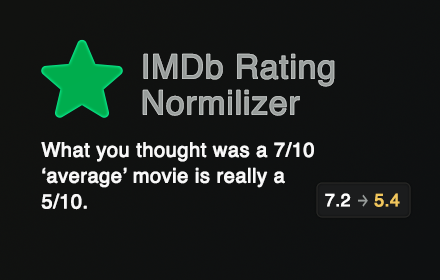
<style>
.page{position:relative;width:440px;height:280px}
.page>*{position:absolute;margin:0}
.t1{font:33.5px/36px "Helvetica";color:#989c9a;font-weight:bold}
.t2{font:20px/25.8px "Helvetica";color:#f8f8f8;font-weight:bold}
.t3{font:17.7px "Helvetica";color:#ffffff;font-weight:bold}
.t4{font:17.7px "Inter-Regular";color:#979c9a;font-weight:bold;scale:0.74 1}
.t5{font:17.7px "Helvetica";color:#f0c65d;font-weight:bold}
</style>
<div class="page">
<p class="t1" style="left:142px;top:53px;width:193px;height:63px">IMDb Rating<br>Normilizer</p>
<p class="t2" style="left:41px;top:142px;width:273px;height:68px">What you thought was a 7/10 ‘average’ movie is really a 5/10.</p>
<p class="t3" style="left:325px;top:193px;width:75px;height:14px">7.2 <span class="t4">→ </span><span class="t5">5.4</span></p>
</div>
